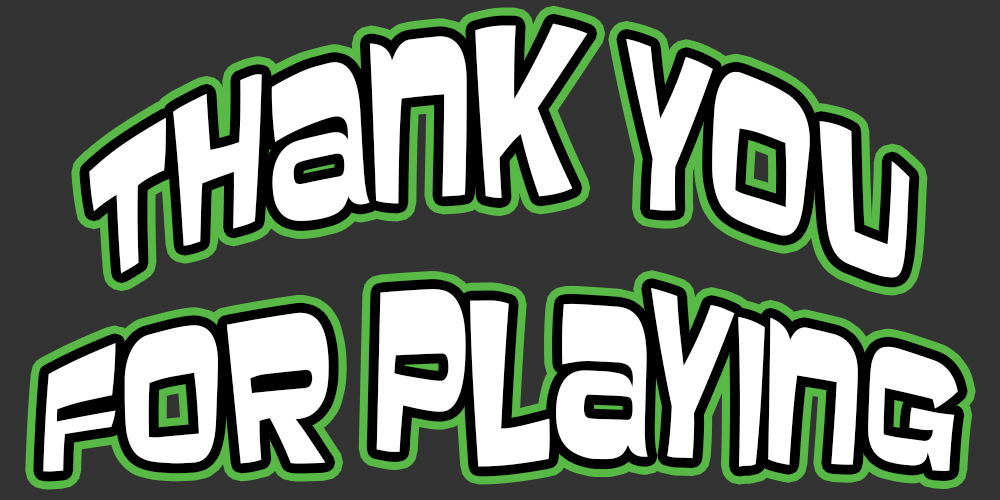
<style>
.page{position:relative;width:1000px;height:500px;background:#333333}
.page>*{position:absolute;margin:0}
.t1{font:133.3px "Baveuse-Regular";color:#ffffff}
</style>
<div class="page">
<p class="t1" style="left:43px;top:23px;width:915px;height:449px;text-align:center">THANK YOU<br>FOR PLAYING</p>
</div>
